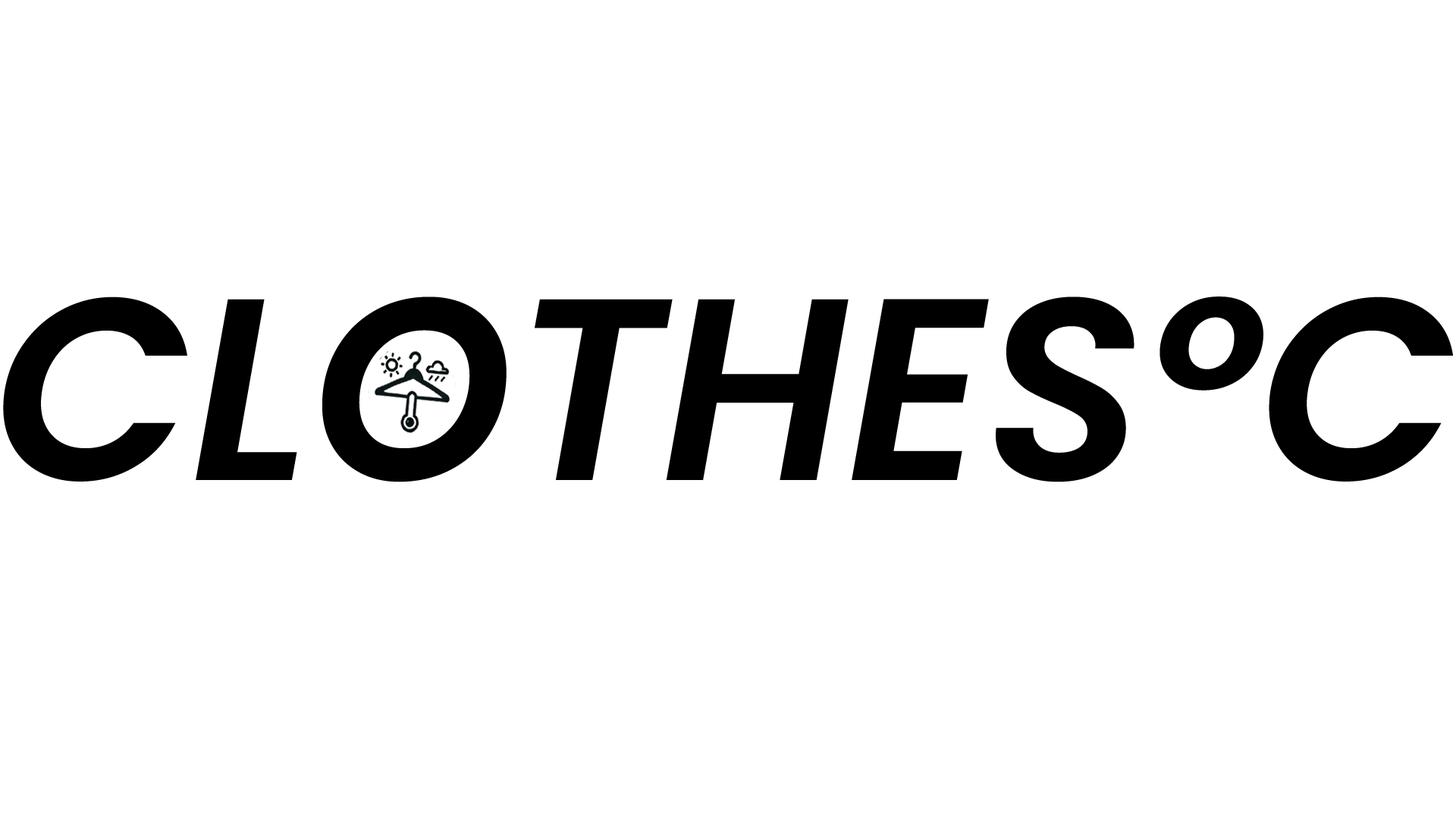
<style>
.page{position:relative;width:1456px;height:819px;background:#ffffff}
.page>*{position:absolute;margin:0}
.t1{font:258.4px "Poppins-SemiBoldItalic";color:#000000;text-transform:uppercase}
</style>
<div class="page">
<p class="t1" style="left:3px;top:297px;width:1450px;height:185px">clothesºC</p>
</div>
